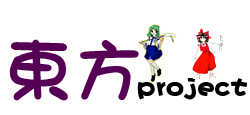
<style>
.page{position:relative;width:250px;height:115px;background:#ffffff}
.page>*{position:absolute;margin:0}
.t1{font:69.3px "DFMaruMoji-W9-WINP-RKSJ-H";color:#560055}
.t2{font:27.1px "DFPHaiBaoW12";color:#000000}
</style>
<div class="page">
<p class="t1" style="left:9px;top:39px;width:130px;height:62px">東方</p>
<p class="t2" style="left:137px;top:78px;width:111px;height:22px">project</p>
</div>
